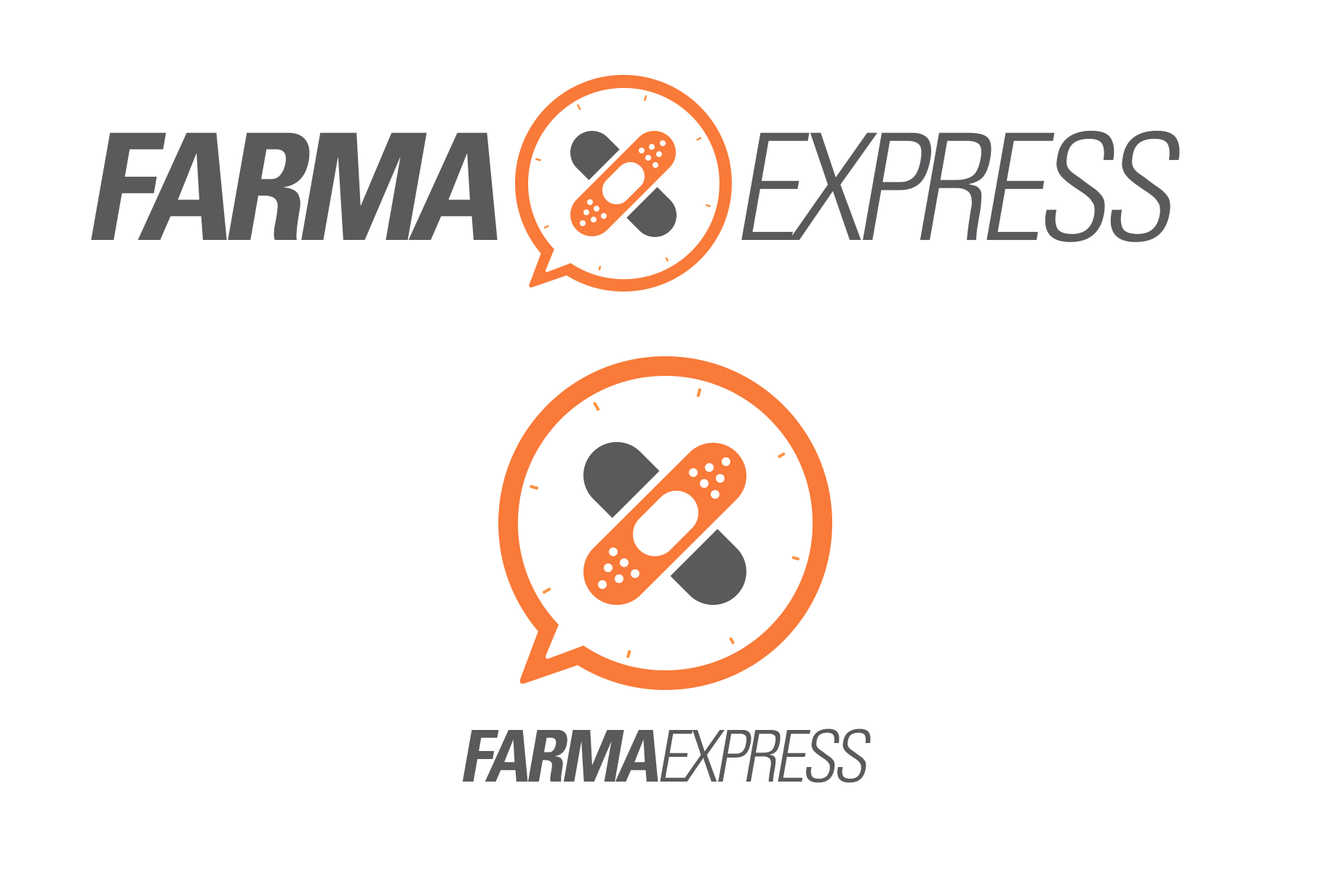
<style>
.page{position:relative;width:1332px;height:895px;background:#ffffff}
.page>*{position:absolute;margin:0}
.t1{font:74.3px "UniversLTStd-LightCn";letter-spacing:-0.06em;color:#5a595c;text-transform:uppercase;font-style:italic}
.t2{font:74.3px "UniversLTStd-BoldCn";letter-spacing:-0.06em;color:#5a595c;text-transform:uppercase;font-style:italic}
.t3{font:35.8px "UniversLTStd-LightCn";letter-spacing:-0.06em;color:#5a595c;text-transform:uppercase;font-style:italic}
.t4{font:35.8px "UniversLTStd-BoldCn";letter-spacing:-0.06em;color:#5a595c;text-transform:uppercase;font-style:italic}
</style>
<div class="page">
<p class="t1" style="left:91px;top:130px;width:1089px;height:112px"><span class="t2">farma          </span>EXPRESS</p>
<p class="t3" style="left:463px;top:729px;width:408px;height:54px"><span class="t4">farma</span>EXPRESS</p>
</div>
